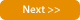
<style>
.page{position:relative;width:80px;height:20px;background:#e68d00}
.page>*{position:absolute;margin:0}
.t1{font:11px "MyriadPro-Semibold";color:#ffffff}
</style>
<div class="page">
<p class="t1" style="left:23px;top:5px;width:37px;height:8px">Next &gt;&gt;</p>
</div>
